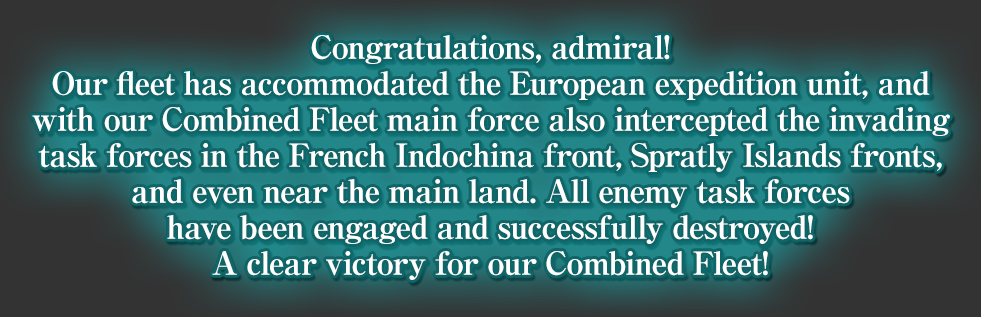
<style>
.page{position:relative;width:981px;height:317px}
.page>*{position:absolute;margin:0}
.t1{font:32px/36px "RyuminPro-ExBold";letter-spacing:-0.04em;color:#ffffff}
</style>
<div class="page">
<p class="t1" style="left:32px;top:35px;width:918px;height:245px;text-align:center">Congratulations, admiral!<br>Our fleet has accommodated the European expedition unit, and<br>with our Combined Fleet main force also intercepted the invading<br>task forces in the French Indochina front, Spratly Islands fronts,<br>and even near the main land. All enemy task forces<br>have been engaged and successfully destroyed!<br>A clear victory for our Combined Fleet!</p>
</div>
